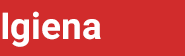
<style>
.page{position:relative;width:185px;height:56px;background:#d12c2c}
.page>*{position:absolute;margin:0}
.t1{font:37px "Roboto-Bold";color:#ffffff}
</style>
<div class="page">
<p class="t1" style="left:2px;top:11px;width:99px;height:36px">Igiena</p>
</div>
